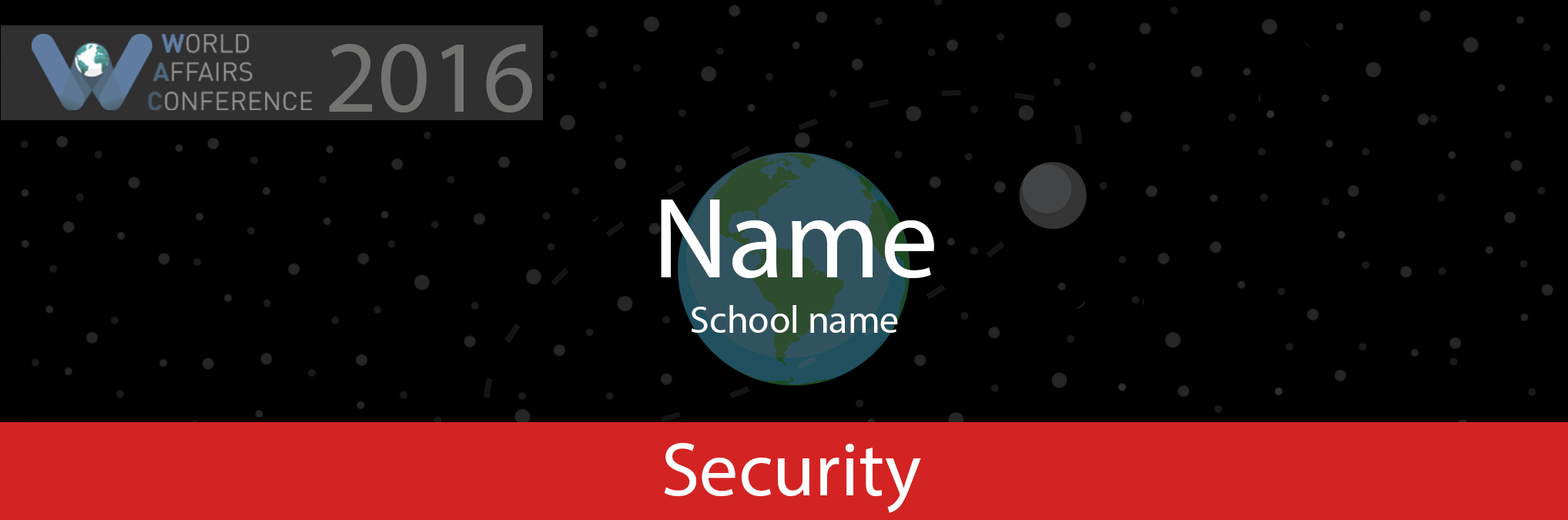
<style>
.page{position:relative;width:1568px;height:520px;background:#000000}
.page>*{position:absolute;margin:0}
.t1{font:102.7px "MyriadPro-Regular";color:#727271}
.t2{font:115.5px "MyriadPro-Regular";color:#ffffff}
.t3{font:38.5px "MyriadPro-Regular";color:#ffffff}
.t4{font:77px "MyriadPro-Regular";color:#ffffff}
</style>
<div class="page">
<p class="t1" style="left:329px;top:43px;width:203px;height:69px">2016</p>
<p class="t2" style="left:661px;top:199px;width:273px;height:79px">Name</p>
<p class="t3" style="left:691px;top:305px;width:207px;height:28px">School name</p>
<p class="t4" style="left:664px;top:443px;width:257px;height:70px">Security</p>
</div>
